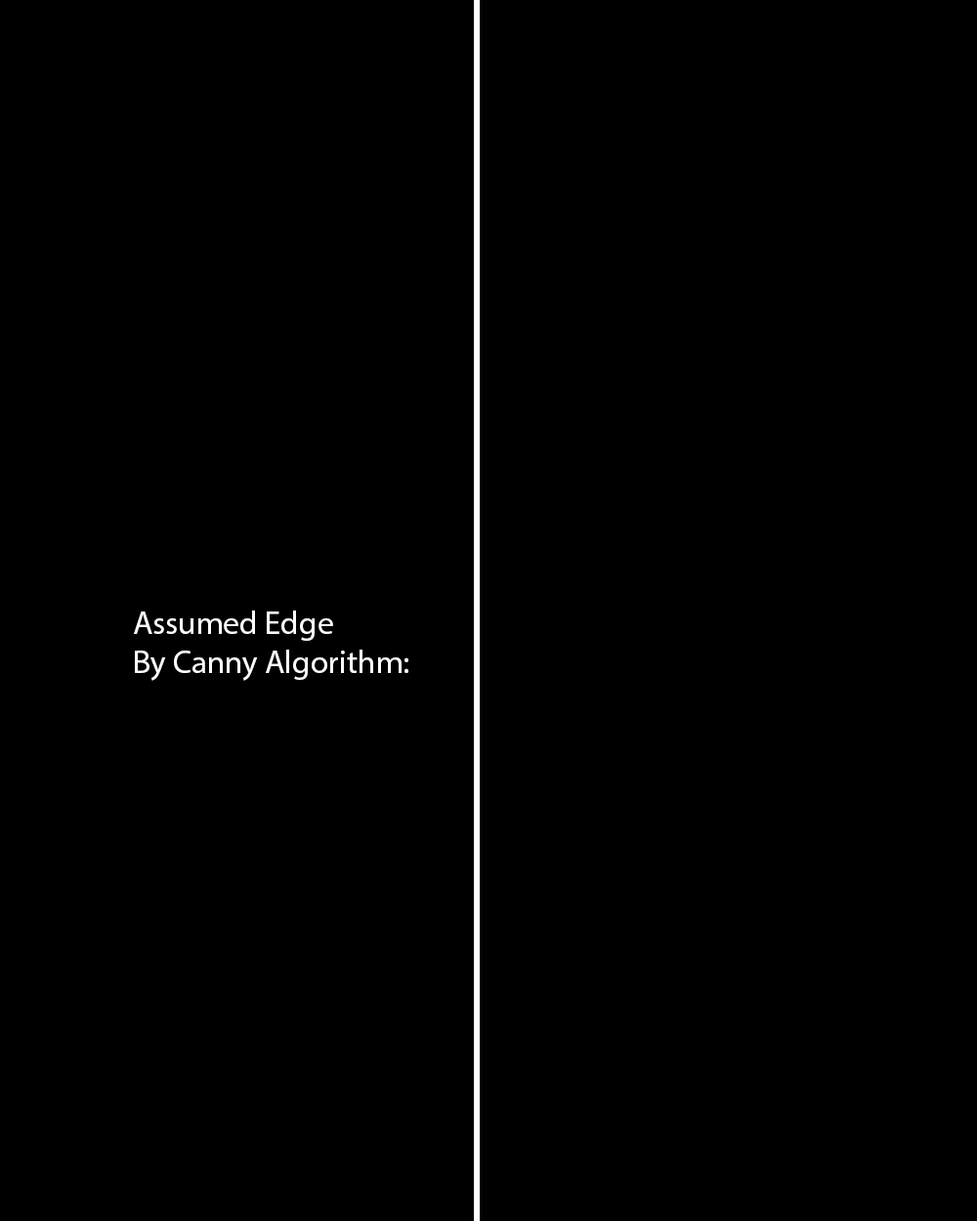
<style>
.page{position:relative;width:977px;height:1221px;background:#000000}
.page>*{position:absolute;margin:0}
.t1{font:32.6px "MyriadPro-Regular";color:#ffffff}
</style>
<div class="page">
<p class="t1" style="left:134px;top:610px;width:274px;height:71px">Assumed Edge<br>By Canny Algorithm:</p>
</div>
